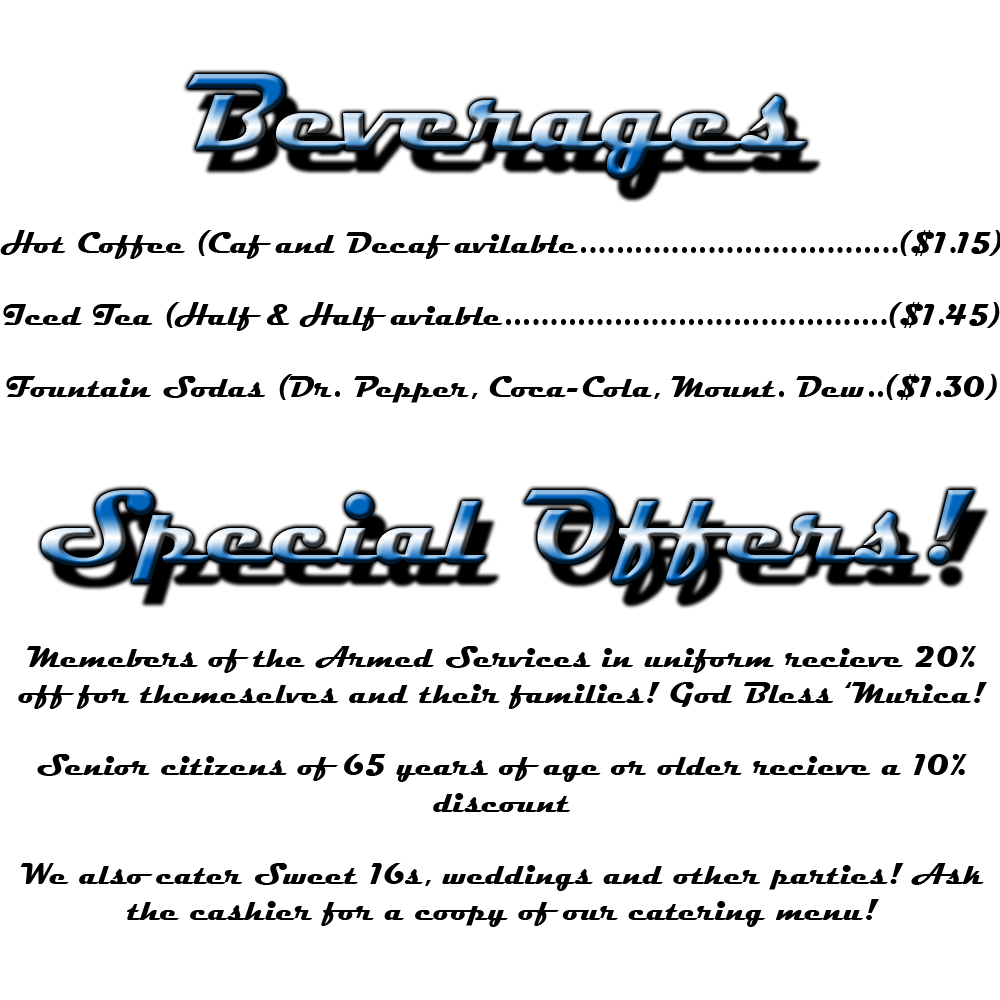
<style>
.page{position:relative;width:1000px;height:1000px;background:#ffffff}
.page>*{position:absolute;margin:0}
.t1{font:30.1px "Magneto-Bold";color:#000000}
</style>
<div class="page">
<p class="t1" style="left:0px;top:230px;width:1002px;height:173px;text-align:center">Hot Coffee (Caf and Decaf avilable...................................($1.15)<br><br>Iced Tea (Half &amp; Half aviable..........................................($1.45)<br><br>Fountain Sodas (Dr. Pepper, Coca-Cola, Mount. Dew..($1.30)</p>
<p class="t1" style="left:18px;top:646px;width:969px;height:281px;text-align:center">Memebers of the Armed Services in uniform recieve 20% <br>off for themeselves and their families! God Bless ‘Murica!<br><br>Senior citizens of 65 years of age or older recieve a 10% discount<br><br>We also cater Sweet 16s, weddings and other parties! Ask the cashier for a coopy of our catering menu!</p>
</div>
